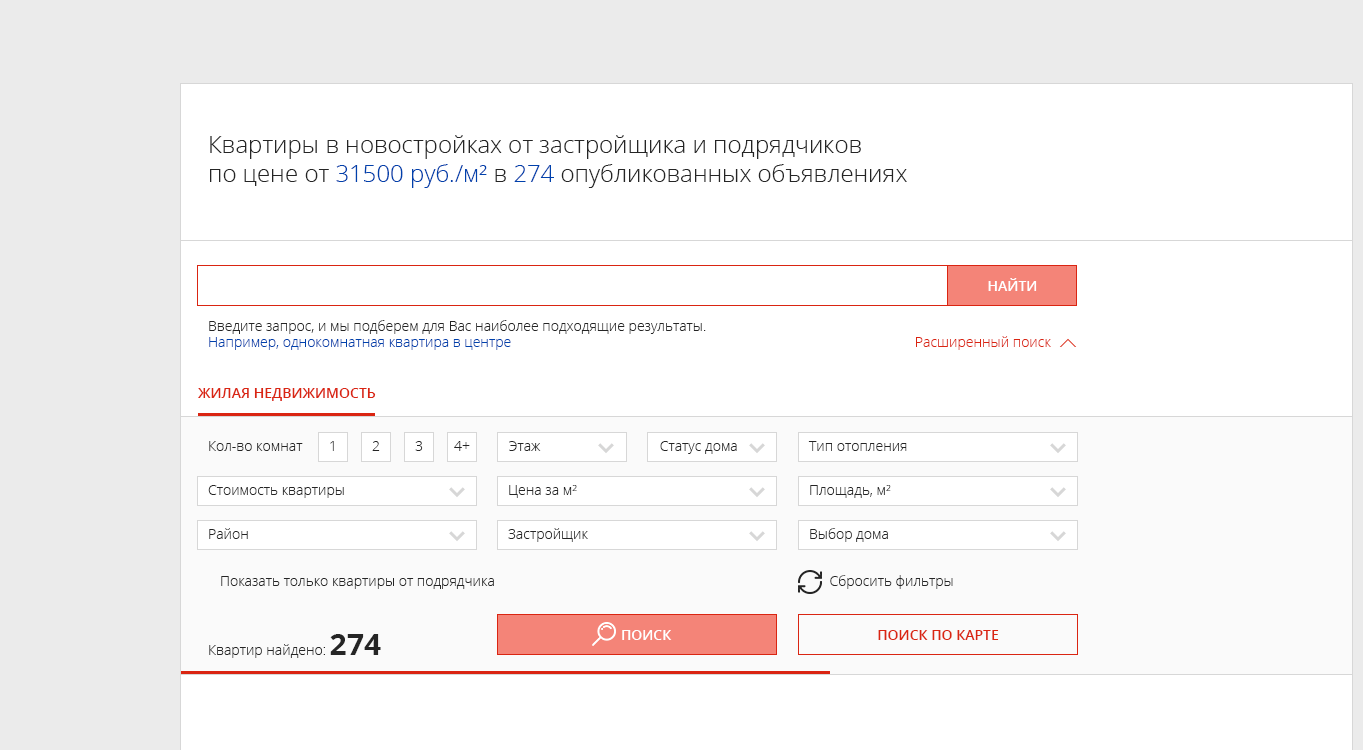
<style>
.page{position:relative;width:1363px;height:750px;background:#ffffff}
.page>*{position:absolute;margin:0}
.t1{font:24px "OpenSans-Light";color:#252525}
.t2{font:24px "OpenSans-Light";color:#0041ac}
.t3{font:14px "OpenSans-Semibold";color:#ffffff}
.t4{font:14px "OpenSans-Light";color:#252525}
.t5{font:14px "OpenSans-Light";color:#0041ac}
.t6{font:14px "OpenSans-Light";color:#da2512}
.t7{font:14px "OpenSans-Semibold";color:#da2512}
.t8{font:14px "OpenSans-Light"}
.t9{font:30px "OpenSans-Bold";color:#252525}
</style>
<div class="page">
<p class="t1" style="left:210px;top:135px;width:697px;height:53px">Квартиры в новостройках от застройщика и подрядчиков<br>по цене от <span class="t2">31500 руб./м²</span> в <span class="t2">274</span> опубликованных объявлениях</p>
<p class="t3" style="left:988px;top:278px;width:49px;height:13px">НАЙТИ</p>
<p class="t4" style="left:209px;top:320px;width:842px;height:30px">Введите запрос, и мы подберем для Вас наиболее подходящие результаты.<br><span class="t5">Например, однокомнатная квартира в центре                                                                                                               </span><span class="t6">Расширенный поиск</span></p>
<p class="t7" style="left:198px;top:388px;width:178px;height:13px">ЖИЛАЯ НЕДВИЖИМОСТЬ</p>
<p class="t4" style="left:209px;top:441px;width:94px;height:10px">Кол-во комнат</p>
<p class="t8" style="left:330px;top:441px;width:4px;height:10px">1</p>
<p class="t4" style="left:372px;top:441px;width:8px;height:10px">2</p>
<p class="t4" style="left:415px;top:441px;width:8px;height:10px">3</p>
<p class="t4" style="left:454px;top:441px;width:16px;height:10px">4+</p>
<p class="t4" style="left:509px;top:441px;width:32px;height:10px">Этаж</p>
<p class="t4" style="left:660px;top:441px;width:77px;height:13px">Статус дома</p>
<p class="t4" style="left:808px;top:441px;width:99px;height:10px">Тип отопления</p>
<p class="t4" style="left:208px;top:485px;width:136px;height:13px">Стоимость квартиры</p>
<p class="t4" style="left:509px;top:485px;width:68px;height:13px">Цена за м²</p>
<p class="t4" style="left:810px;top:485px;width:81px;height:13px">Площадь, м²</p>
<p class="t4" style="left:209px;top:528px;width:39px;height:11px">Район</p>
<p class="t4" style="left:508px;top:528px;width:80px;height:14px">Застройщик</p>
<p class="t4" style="left:810px;top:528px;width:78px;height:14px">Выбор дома</p>
<p class="t4" style="left:221px;top:575px;width:732px;height:14px">Показать только квартиры от подрядчика                                                                                            Сбросить фильтры</p>
<p class="t3" style="left:622px;top:630px;width:50px;height:10px">ПОИСК</p>
<p class="t7" style="left:878px;top:630px;width:121px;height:10px">ПОИСК ПО КАРТЕ</p>
<p class="t4" style="left:209px;top:634px;width:172px;height:24px">Квартир найдено: <span class="t9">274</span></p>
</div>
